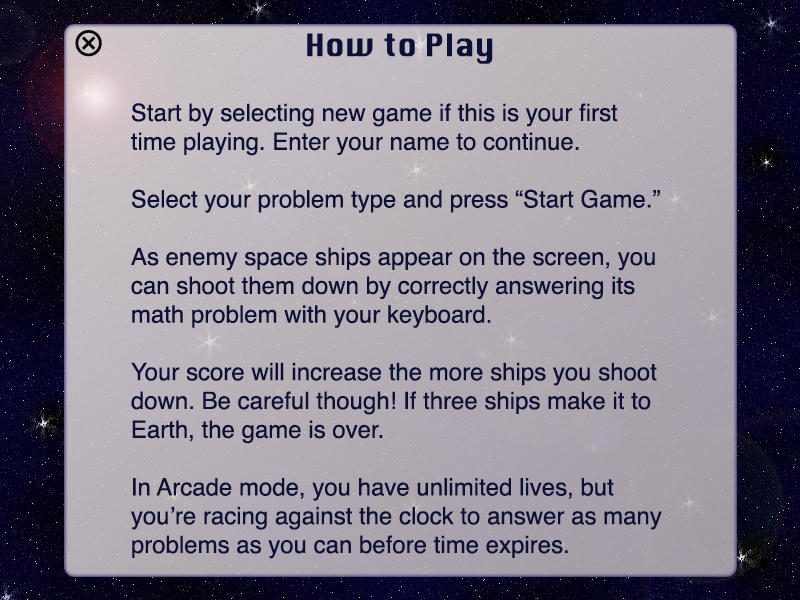
<style>
.page{position:relative;width:800px;height:600px}
.page>*{position:absolute;margin:0}
.t1{font:24px "Helvetica";color:#0d1036}
.t2{font:30px "Krungthep";color:#0d1036}
</style>
<div class="page">
<p class="t1" style="left:131px;top:33px;width:531px;height:526px;text-align:center"><span class="t2">How to Play<br><br></span>Start by selecting new game if this is your first time playing. Enter your name to continue.<br><br>Select your problem type and press “Start Game.” <br><br>As enemy space ships appear on the screen, you can shoot them down by correctly answering its math problem with your keyboard. <br><br>Your score will increase the more ships you shoot down. Be careful though! If three ships make it to Earth, the game is over. <br><br>In Arcade mode, you have unlimited lives, but you’re racing against the clock to answer as many problems as you can before time expires.</p>
</div>
